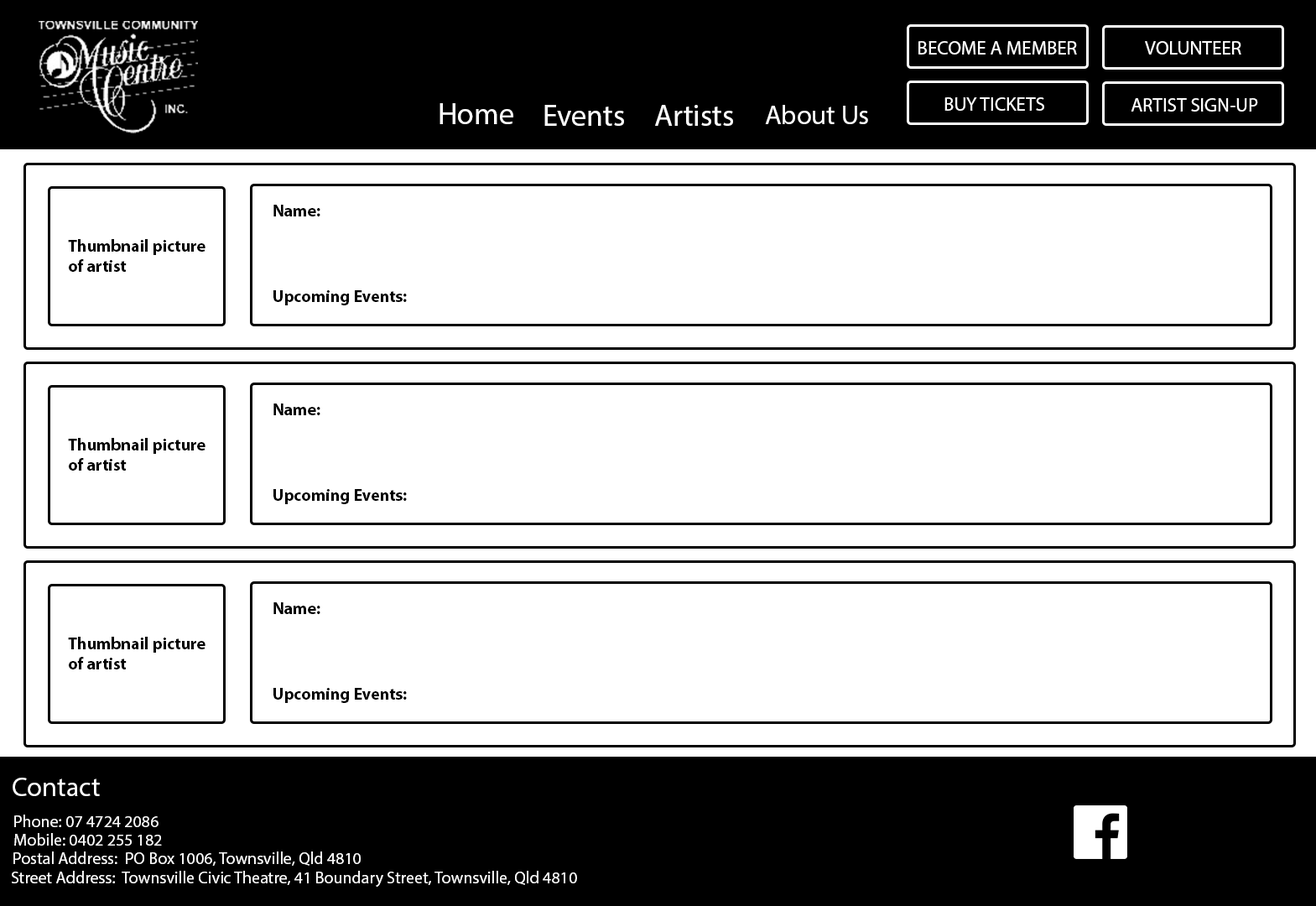
<style>
.page{position:relative;width:1316px;height:906px;background:#ffffff}
.page>*{position:absolute;margin:0}
.t1{font:19.3px "MyriadPro-Regular";color:#ffffff}
.t2{font:30.2px "MyriadPro-Regular";color:#ffffff}
.t3{font:27.1px "MyriadPro-Regular";color:#ffffff}
.t4{font:16.8px "MyriadPro-Bold";color:#000000}
.t5{font:16.8px "MyriadPro-Regular";color:#ffffff}
</style>
<div class="page">
<p class="t1" style="left:919px;top:41px;width:158px;height:14px">BECOME A MEMBER</p>
<p class="t1" style="left:1145px;top:41px;width:97px;height:14px">VOLUNTEER</p>
<p class="t1" style="left:945px;top:97px;width:99px;height:14px">BUY TICKETS</p>
<p class="t1" style="left:1131px;top:98px;width:127px;height:14px">ARTIST SIGN-UP</p>
<p class="t2" style="left:440px;top:103px;width:73px;height:21px">Home</p>
<p class="t2" style="left:544px;top:105px;width:80px;height:21px">Events</p>
<p class="t2" style="left:655px;top:105px;width:78px;height:21px">Artists</p>
<p class="t3" style="left:765px;top:105px;width:103px;height:19px">About Us</p>
<p class="t4" style="left:273px;top:205px;width:47px;height:11px">Name:</p>
<p class="t4" style="left:68px;top:239px;width:138px;height:33px">Thumbnail picture<br>of artist</p>
<p class="t4" style="left:273px;top:290px;width:134px;height:15px">Upcoming Events:</p>
<p class="t4" style="left:273px;top:403px;width:47px;height:12px">Name:</p>
<p class="t4" style="left:68px;top:438px;width:138px;height:33px">Thumbnail picture<br>of artist</p>
<p class="t4" style="left:273px;top:489px;width:134px;height:15px">Upcoming Events:</p>
<p class="t4" style="left:273px;top:602px;width:47px;height:12px">Name:</p>
<p class="t4" style="left:68px;top:637px;width:138px;height:32px">Thumbnail picture<br>of artist</p>
<p class="t4" style="left:273px;top:688px;width:134px;height:15px">Upcoming Events:</p>
<p class="t3" style="left:13px;top:778px;width:87px;height:18px">Contact</p>
<p class="t5" style="left:14px;top:815px;width:145px;height:12px">Phone: 07 4724 2086</p>
<p class="t5" style="left:14px;top:833px;width:148px;height:13px">Mobile: 0402 255 182</p>
<p class="t5" style="left:13px;top:851px;width:348px;height:15px">Postal Address:  PO Box 1006, Townsville, Qld 4810</p>
<p class="t5" style="left:12px;top:871px;width:565px;height:16px">Street Address:  Townsville Civic Theatre, 41 Boundary Street, Townsville, Qld 4810</p>
</div>
